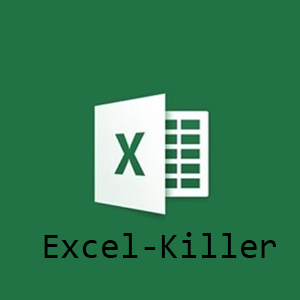
<style>
.page{position:relative;width:300px;height:300px;background:#217345}
.page>*{position:absolute;margin:0}
.t1{font:36px "Consolas";color:#000000}
</style>
<div class="page">
<p class="t1" style="left:44px;top:232px;width:232px;height:26px">Excel-Killer</p>
</div>
